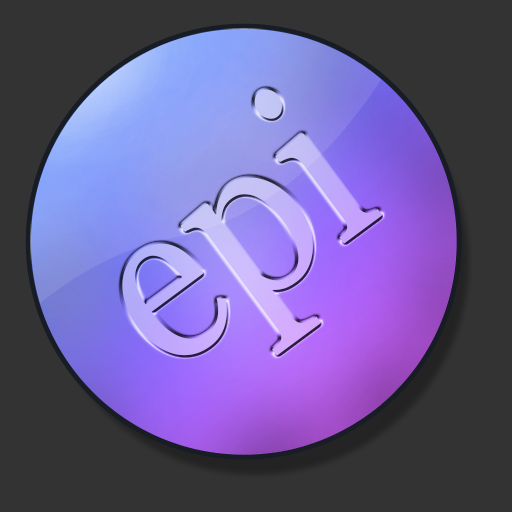
<style>
.page{position:relative;width:512px;height:512px;background:#333333}
.page>*{position:absolute;margin:0}
.t1{font:233px "Georgia";color:#c4b1fb;scale:0.88 1}
</style>
<div class="page">
<p class="t1" style="left:122px;top:89px;width:261px;height:267px;rotate:-37deg">epi</p>
</div>
